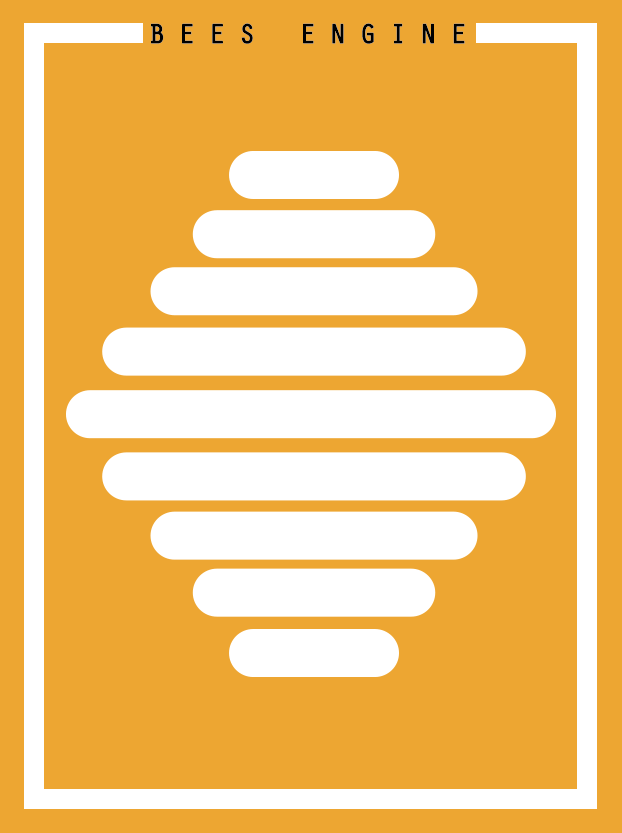
<style>
.page{position:relative;width:622px;height:833px;background:#eda632}
.page>*{position:absolute;margin:0}
.t1{font:28px "OratorStd";letter-spacing:0.4em;color:#000000;text-transform:uppercase;font-weight:bold;scale:1.05 1}
</style>
<div class="page">
<p class="t1" style="left:151px;top:23px;width:314px;height:21px">Bees Engine</p>
<p class="t1" style="left:151px;top:23px;width:314px;height:21px">Bees Engine</p>
</div>
